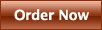
<style>
.page{position:relative;width:102px;height:30px}
.page>*{position:absolute;margin:0}
.t1{font:14px "LucidaSans-Demi";letter-spacing:-0.025em;color:#ffffff}
</style>
<div class="page">
<p class="t1" style="left:14px;top:9px;width:75px;height:12px">Order Now</p>
</div>
